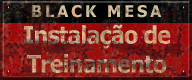
<style>
.page{position:relative;width:192px;height:80px}
.page>*{position:absolute;margin:0}
.t1{font:23.7px/29px "Verdana-Bold";letter-spacing:-0.06em;scale:0.91 1}
</style>
<div class="page">
<p class="t1" style="left:24px;top:24px;width:147px;height:49px;text-align:center">Instalação de<br>Treinamento</p>
</div>
